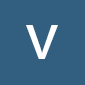
<style>
.page{position:relative;width:85px;height:85px;background:#325e80}
.page>*{position:absolute;margin:0}
.t1{font:70px "MyriadPro-Regular";letter-spacing:0.16em;color:#ffffff}
</style>
<div class="page">
<p class="t1" style="left:26px;top:25px;width:32px;height:34px">v</p>
</div>
